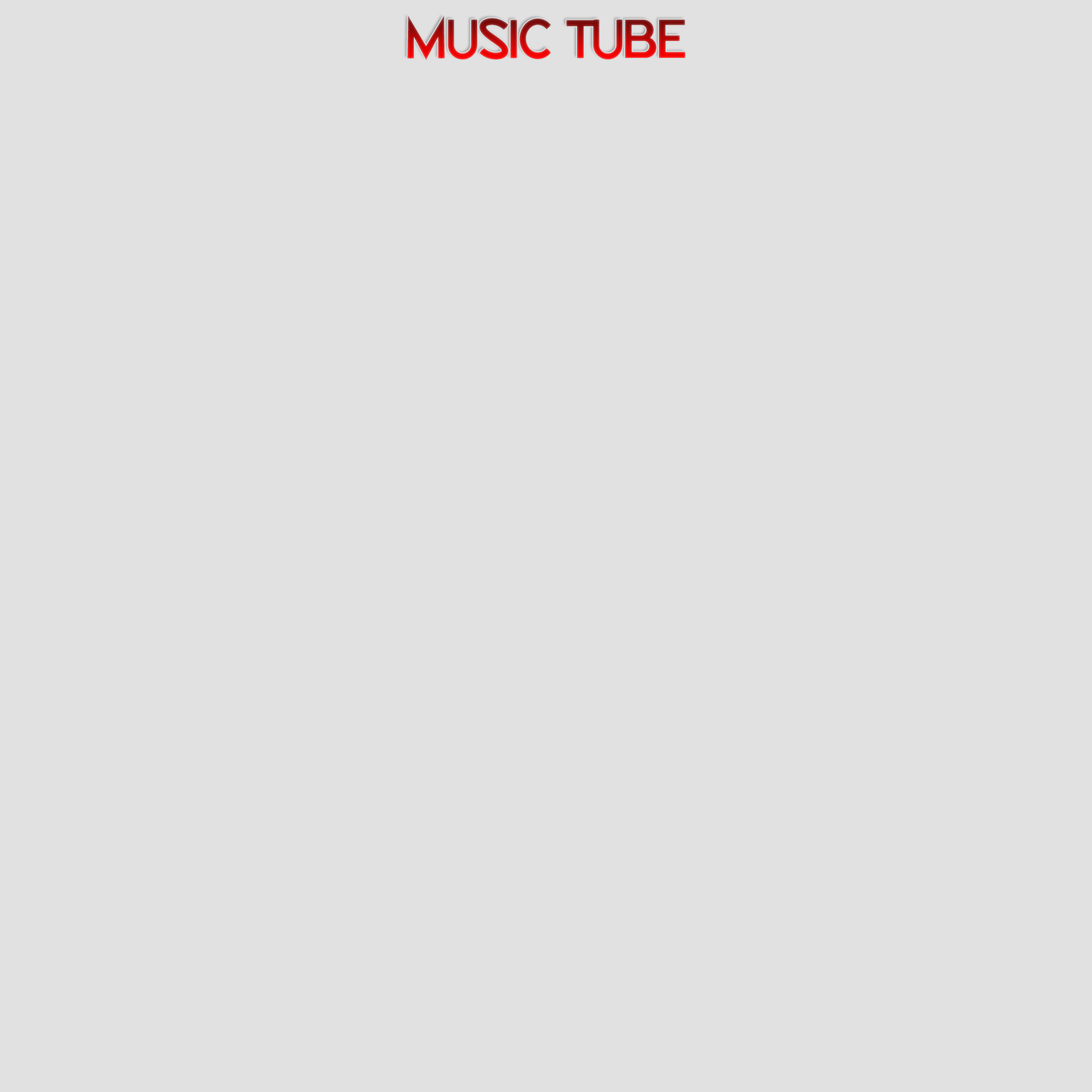
<style>
.page{position:relative;width:1092px;height:1092px;background:#e1e1e1}
.page>*{position:absolute;margin:0}
.t1{font:38.2px "zaguatica-Bold";letter-spacing:0.02em}
</style>
<div class="page">
<p class="t1" style="left:407px;top:16px;width:278px;height:44px">MUSIC TUBE</p>
</div>
